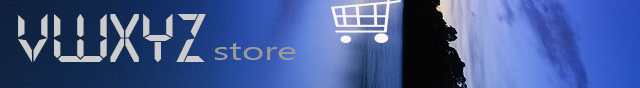
<style>
.page{position:relative;width:640px;height:88px}
.page>*{position:absolute;margin:0}
.t1{font:66.8px "DigifaceWide";color:#cccccc;scale:0.71 1}
.t2{font:26.2px "SegoeUI";color:#999999;scale:1.45 1}
</style>
<div class="page">
<p class="t1" style="left:18px;top:14px;width:188px;height:49px">VWXYZ</p>
<p class="t2" style="left:214px;top:43px;width:82px;height:17px">store</p>
</div>
